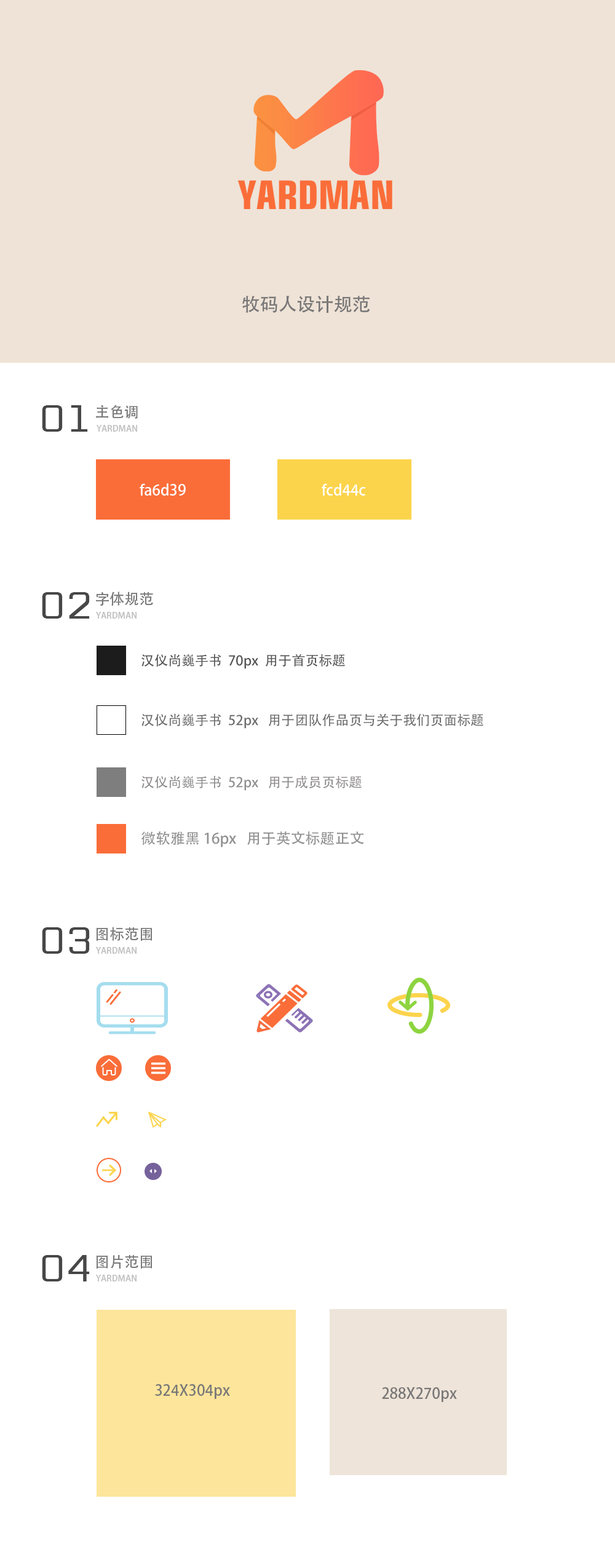
<style>
.page{position:relative;width:615px;height:1568px;background:#ffffff}
.page>*{position:absolute;margin:0}
.t1{font:18.4px "AdobeHeitiStd-Regular";color:#797878}
.t2{font:44.3px "PARaDOS";color:#474747}
.t3{font:14.8px "AdobeHeitiStd-Regular";color:#797878}
.t4{font:8.6px "AdobeHeitiStd-Regular";color:#c0c0c0}
.t5{font:14.8px "AdobeHeitiStd-Regular";color:#ffffff}
.t6{font:13.5px "AdobeHeitiStd-Regular";color:#535353}
.t7{font:13.5px "AdobeHeitiStd-Regular";color:#6c6c6c}
.t8{font:13.5px "AdobeHeitiStd-Regular";color:#908d8d}
.t9{font:14.8px "AdobeHeitiStd-Regular";color:#919191}
</style>
<div class="page">
<p class="t1" style="left:242px;top:296px;width:128px;height:17px">牧码人设计规范</p>
<p class="t2" style="left:42px;top:405px;width:46px;height:27px">01</p>
<p class="t3" style="left:96px;top:405px;width:42px;height:14px">主色调</p>
<p class="t4" style="left:97px;top:425px;width:40px;height:7px">YARDMAN</p>
<p class="t5" style="left:140px;top:483px;width:46px;height:13px">fa6d39</p>
<p class="t5" style="left:322px;top:483px;width:43px;height:13px">fcd44c</p>
<p class="t2" style="left:42px;top:592px;width:48px;height:27px">02</p>
<p class="t3" style="left:96px;top:592px;width:57px;height:14px">字体规范</p>
<p class="t4" style="left:96px;top:612px;width:41px;height:7px">YARDMAN</p>
<p class="t6" style="left:141px;top:654px;width:204px;height:15px">汉仪尚巍手书  70px  用于首页标题</p>
<p class="t7" style="left:141px;top:713px;width:342px;height:16px">汉仪尚巍手书  52px   用于团队作品页与关于我们页面标题</p>
<p class="t8" style="left:141px;top:775px;width:221px;height:16px">汉仪尚巍手书  52px   用于成员页标题</p>
<p class="t9" style="left:141px;top:831px;width:223px;height:16px">微软雅黑 16px   用于英文标题正文</p>
<p class="t2" style="left:42px;top:927px;width:48px;height:27px">03</p>
<p class="t3" style="left:96px;top:927px;width:56px;height:14px">图标范围</p>
<p class="t4" style="left:96px;top:947px;width:41px;height:7px">YARDMAN</p>
<p class="t2" style="left:42px;top:1255px;width:48px;height:26px">04</p>
<p class="t3" style="left:96px;top:1255px;width:56px;height:14px">图片范围</p>
<p class="t4" style="left:96px;top:1275px;width:41px;height:6px">YARDMAN</p>
<p class="t3" style="left:155px;top:1384px;width:75px;height:15px">324X304px</p>
<p class="t3" style="left:382px;top:1387px;width:75px;height:15px">288X270px</p>
</div>
